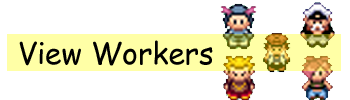
<style>
.page{position:relative;width:350px;height:100px;background:#ffffff}
.page>*{position:absolute;margin:0}
.t1{font:29.9px "ComicSansMS";color:#000000}
</style>
<div class="page">
<p class="t1" style="left:19px;top:40px;width:194px;height:26px">View Workers</p>
</div>
